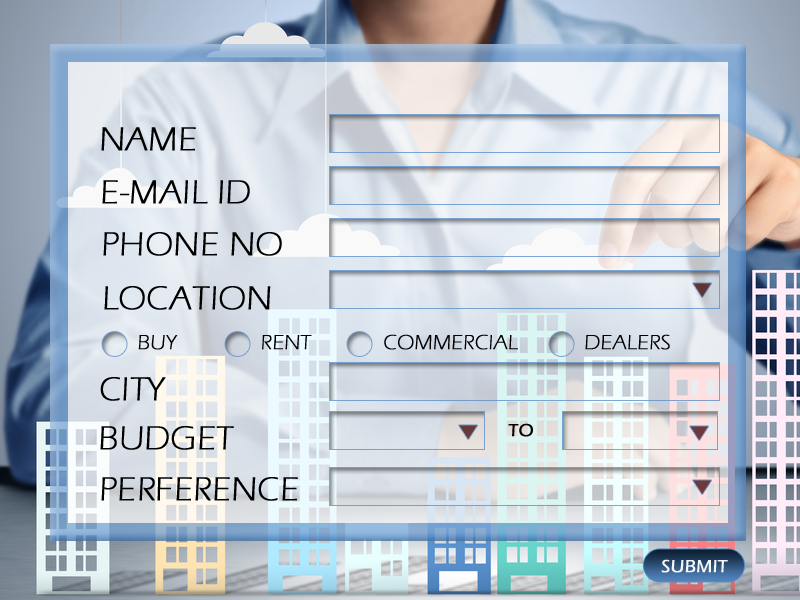
<style>
.page{position:relative;width:800px;height:600px}
.page>*{position:absolute;margin:0}
.t1{font:34px "ErasITC-Light";color:#000000;text-transform:uppercase;font-weight:bold;scale:1.03 1}
.t2{font:21px "ErasITC-Light";color:#000000;text-transform:uppercase;font-weight:bold;scale:1.03 1}
.t3{font:18px "ErasITC-Medium";color:#0d0000;text-transform:uppercase;font-weight:bold;scale:1.03 1}
.t4{font:18px "ErasITC-Medium";color:#ffffff;text-transform:uppercase;font-weight:bold;scale:1.03 1}
</style>
<div class="page">
<p class="t1" style="left:101px;top:127px;width:95px;height:24px">Name</p>
<p class="t1" style="left:102px;top:180px;width:148px;height:24px">E-mail id</p>
<p class="t1" style="left:103px;top:232px;width:179px;height:24px">phone no</p>
<p class="t1" style="left:104px;top:286px;width:167px;height:24px">Location</p>
<p class="t2" style="left:138px;top:334px;width:532px;height:16px">Buy              Rent            COmmercial           Dealers</p>
<p class="t1" style="left:100px;top:377px;width:66px;height:24px">City</p>
<p class="t3" style="left:508px;top:423px;width:25px;height:14px">to</p>
<p class="t1" style="left:100px;top:426px;width:134px;height:24px">Budget</p>
<p class="t1" style="left:101px;top:477px;width:197px;height:24px">Perference</p>
<p class="t4" style="left:661px;top:559px;width:67px;height:14px;opacity:0.94">submit</p>
</div>
